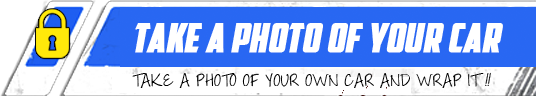
<style>
.page{position:relative;width:536px;height:96px;background:#ffffff}
.page>*{position:absolute;margin:0}
.t1{font:40px "AmericanCaptain";color:#ffffff;text-transform:uppercase;font-weight:bold;font-style:italic}
.t2{font:18px "ThrowMyHandsUpintheAir";letter-spacing:0.025em;color:#000000;text-transform:uppercase}
.t3{font:18px "ThrowMyHandsUpintheAir";letter-spacing:0.025em;color:#000000;text-transform:uppercase;font-style:italic}
</style>
<div class="page">
<p class="t1" style="left:135px;top:23px;width:368px;height:30px">take a photo of your car</p>
<p class="t2" style="left:132px;top:72px;width:359px;height:16px">take a photo of your own car and wrap it <span class="t3">!!</span></p>
</div>
